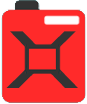
<style>
.page{position:relative;width:87px;height:104px;background:#ff2a2a}
.page>*{position:absolute;margin:0}
.t1{font:79.1px "ArialNarrow";color:#333333;font-weight:bold;scale:1.67 1}
</style>
<div class="page">
<p class="t1" style="left:6px;top:31px;width:72px;height:57px">X</p>
</div>
